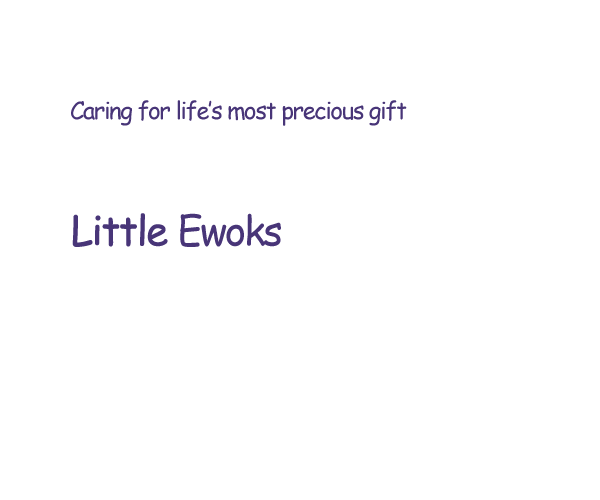
<style>
.page{position:relative;width:600px;height:500px;background:#ffffff}
.page>*{position:absolute;margin:0}
.t1{font:24px "ComicSansMS";letter-spacing:-0.06em;color:#473478}
.t2{font:40px "ComicSansMS";letter-spacing:-0.06em;color:#483578;font-weight:bold}
.t3{font:40px "ComicSansMS";letter-spacing:-0.06em;color:#483578}
</style>
<div class="page">
<p class="t1" style="left:71px;top:100px;width:336px;height:26px">Caring for life’s most precious gift</p>
<p class="t2" style="left:72px;top:213px;width:209px;height:34px">Little <span class="t3">Ewoks</span></p>
</div>
